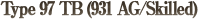
<style>
.page{position:relative;width:219px;height:19px;background:#ffffff}
.page>*{position:absolute;margin:0}
.t1{font:18px "RyuminPro-ExBold";letter-spacing:-0.08em;color:#4a3f32;font-weight:bold;scale:0.9 1}
</style>
<div class="page">
<p class="t1" style="left:0px;top:0px;width:198px;height:19px">Type 97 TB (931 AG/Skilled)</p>
</div>
